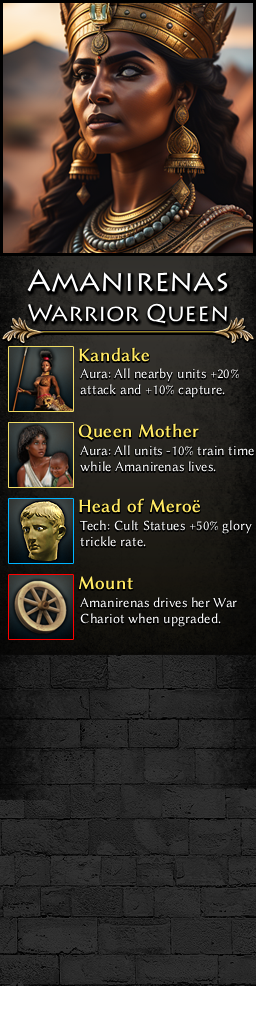
<style>
.page{position:relative;width:256px;height:1024px}
.page>*{position:absolute;margin:0}
.t1{font:24px/30px "Lithos";color:#ffffff}
.t2{font:30px/30px "Lithos";color:#ffffff}
.t3{font:19px "LinBiolinumO";color:#ffe963;font-weight:bold}
.t4{font:14px "LinBiolinumO";color:#ffffff}
</style>
<div class="page">
<p class="t1" style="left:27px;top:268px;width:201px;height:56px;text-align:center"><span class="t2">Amanirenas<br></span>Warrior Queen</p>
<p class="t3" style="left:79px;top:347px;width:71px;height:15px">Kandake</p>
<p class="t4" style="left:80px;top:368px;width:159px;height:30px">Aura: All nearby units +20%<br>attack and +10% capture.</p>
<p class="t3" style="left:78px;top:423px;width:121px;height:17px">Queen Mother</p>
<p class="t4" style="left:80px;top:445px;width:174px;height:27px">Aura: All units -10% train time<br>while Amanirenas lives.</p>
<p class="t3" style="left:79px;top:498px;width:122px;height:15px">Head of Meroë</p>
<p class="t4" style="left:80px;top:520px;width:172px;height:27px">Tech: Cult Statues +50% glory<br>trickle rate.</p>
<p class="t3" style="left:78px;top:576px;width:55px;height:14px">Mount</p>
<p class="t4" style="left:80px;top:597px;width:157px;height:30px">Amanirenas drives her War<br>Chariot when upgraded.</p>
</div>
